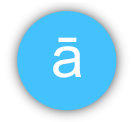
<style>
.page{position:relative;width:134px;height:122px;background:#43c2fd}
.page>*{position:absolute;margin:0}
.t1{font:58.3px "ArialMT";color:#ffffff}
</style>
<div class="page">
<p class="t1" style="left:53px;top:37px;width:29px;height:41px">ā</p>
</div>
